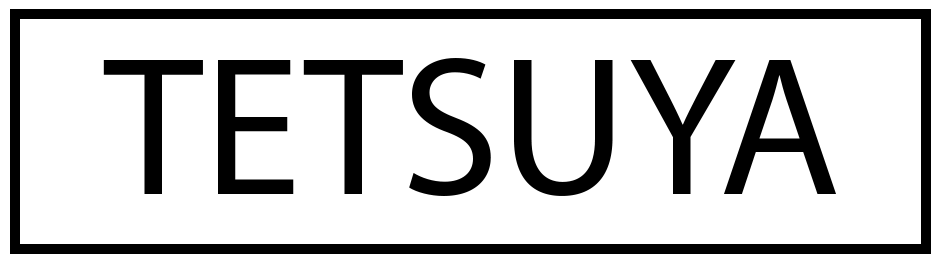
<style>
.page{position:relative;width:941px;height:263px;background:#ffffff}
.page>*{position:absolute;margin:0}
.t1{font:198.5px "MyriadPro-Regular";color:#000000}
</style>
<div class="page">
<p class="t1" style="left:103px;top:58px;width:733px;height:138px">TETSUYA</p>
</div>
